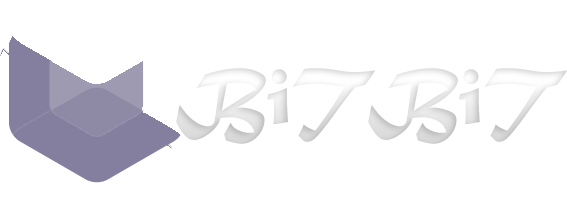
<style>
.page{position:relative;width:567px;height:200px;background:#ffffff}
.page>*{position:absolute;margin:0}
.t1{font:83.3px "MaturaMTScriptCapitals"}
</style>
<div class="page">
<p class="t1" style="left:176px;top:68px;width:392px;height:76px">BiTBiT</p>
</div>
